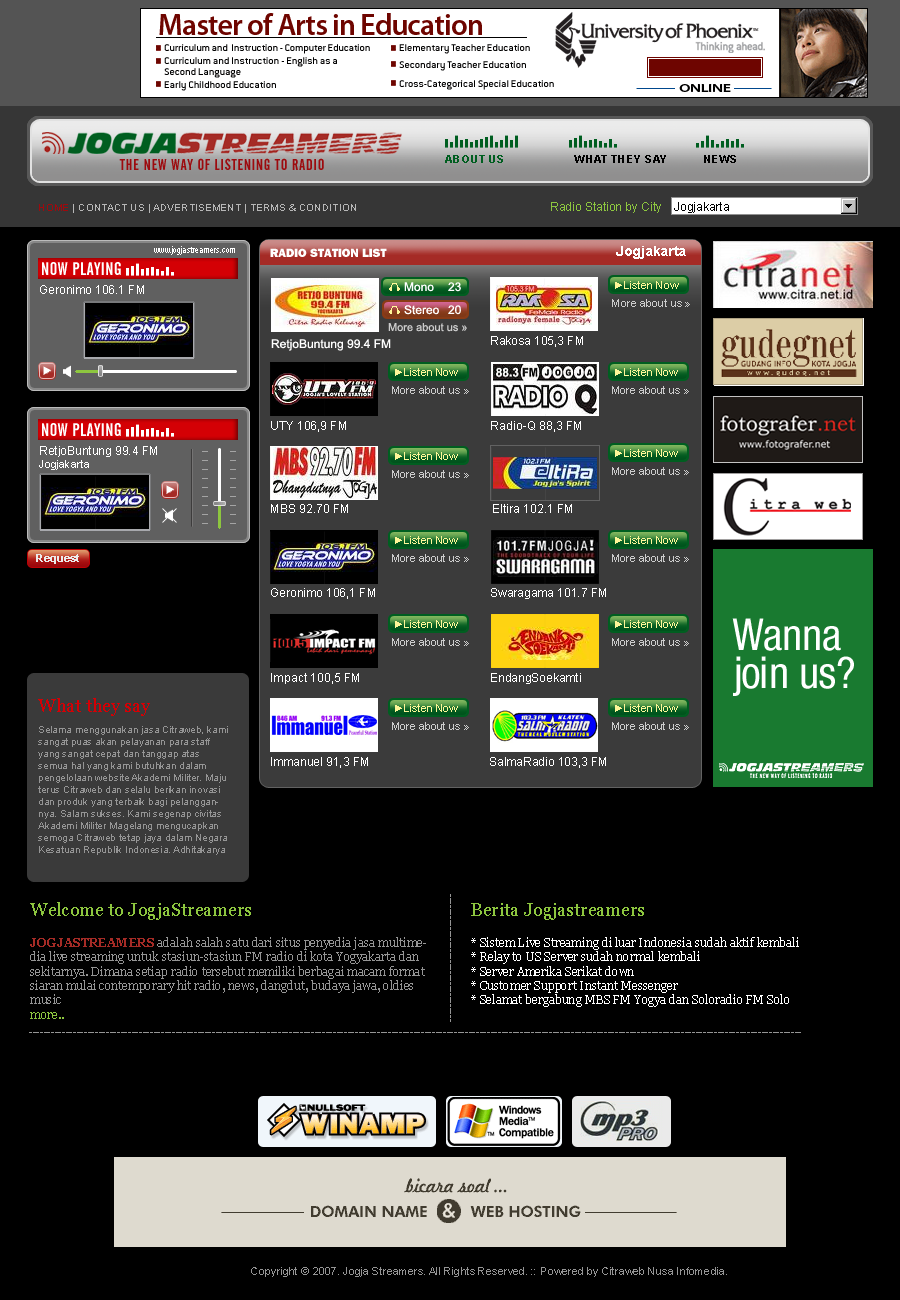
<style>
.page{position:relative;width:900px;height:1300px;background:#000000}
.page>*{position:absolute;margin:0}
.t1{font:11px "Arial-BoldMT";letter-spacing:0.025em;color:#000000;text-transform:uppercase}
.t2{font:11px "Arial-BoldMT";letter-spacing:0.025em;color:#005e20;text-transform:uppercase}
.t3{font:10px "ArialMT";letter-spacing:0.025em;color:#b7b7b7;text-transform:uppercase}
.t4{font:10px "ArialMT";letter-spacing:0.025em;color:#9d0a0e;text-transform:uppercase}
.t5{font:12px "ArialMT";color:#8dc63f}
.t6{font:12px "ArialMT";color:#000000}
.t7{font:9px "ArialNarrow";color:#ffffff}
.t8{font:14px "Arial-BoldMT";color:#ffffff}
.t9{font:12px "FrancisGothicNormal";color:#ffffff}
.t10{font:18px "AlternateGothicNo2BT-Regular";letter-spacing:0.025em;color:#ffffff}
.t11{font:11px "ArialMT";color:#fff799}
.t12{font:12px "ArialMT";color:#ffffff}
.t13{font:11px "ArialMT";color:#cccccc}
.t14{font:11px "ArialMT";color:#ffffff}
.t15{font:11px "Arial-BoldMT";color:#ebebeb}
.t16{font:18px "Georgia";color:#d40005}
.t17{font:10px "ArialMT";color:#959595}
.t18{font:11px "Arial-BoldMT";color:#ffffff}
.t19{font:10px "ArialMT";color:#f7941d}
.t20{font:11px "Arial-BoldMT";color:#959595}
.t21{font:12px "Georgia";color:#959595}
.t22{font:18px "Georgia";color:#8dc63f}
.t23{font:12px "Georgia-Bold";color:#a52b26}
.t24{font:12px "Georgia";color:#8dc63f}
.t25{font:12px "Georgia";color:#ffffff}
.t26{font:11px "ArialMT";color:#959595}
</style>
<div class="page">
<p class="t1" style="left:445px;top:155px;width:291px;height:8px"><span class="t2">ABOUT US</span>                     WHAT THEY SAY           NEWS</p>
<p class="t3" style="left:39px;top:204px;width:317px;height:9px"><span class="t4">Home</span> | Contact Us | Advertisement | terms &amp; condition</p>
<p class="t5" style="left:551px;top:202px;width:110px;height:11px">Radio Station by City</p>
<p class="t6" style="left:674px;top:202px;width:55px;height:11px">Jogjakarta</p>
<p class="t7" style="left:154px;top:246px;width:81px;height:9px">www.jogjastreamers.com</p>
<p class="t8" style="left:616px;top:246px;width:70px;height:13px">Jogjakarta</p>
<p class="t9" style="left:270px;top:248px;width:117px;height:9px">RADIO STATION LIST</p>
<p class="t10" style="left:42px;top:262px;width:79px;height:13px">NOW PLAYING</p>
<p class="t11" style="left:615px;top:281px;width:64px;height:8px">►Listen Now</p>
<p class="t12" style="left:40px;top:285px;width:104px;height:9px">Geronimo 106.1 FM</p>
<p class="t12" style="left:404px;top:282px;width:30px;height:10px">Mono</p>
<p class="t12" style="left:448px;top:282px;width:13px;height:10px">23</p>
<p class="t12" style="left:404px;top:305px;width:35px;height:10px">Stereo</p>
<p class="t12" style="left:448px;top:305px;width:13px;height:10px">20</p>
<p class="t13" style="left:612px;top:299px;width:78px;height:8px">More about us »</p>
<p class="t13" style="left:388px;top:323px;width:79px;height:9px">More about us »</p>
<p class="t12" style="left:271px;top:339px;width:120px;height:12px">RetjoBuntung 99.4 FM</p>
<p class="t12" style="left:491px;top:336px;width:92px;height:11px">Rakosa 105,3 FM</p>
<p class="t12" style="left:271px;top:421px;width:75px;height:11px">UTY 106,9 FM</p>
<p class="t12" style="left:491px;top:421px;width:90px;height:11px">Radio-Q 88,3 FM</p>
<p class="t12" style="left:40px;top:446px;width:117px;height:11px">RetjoBuntung 99.4 FM</p>
<p class="t14" style="left:39px;top:460px;width:50px;height:10px">Jogjakarta</p>
<p class="t12" style="left:271px;top:504px;width:77px;height:9px">MBS 92.70 FM</p>
<p class="t12" style="left:493px;top:504px;width:79px;height:9px">Eltira 102.1 FM</p>
<p class="t15" style="left:36px;top:554px;width:43px;height:10px">Request</p>
<p class="t12" style="left:271px;top:588px;width:104px;height:11px">Geronimo 106,1 FM</p>
<p class="t12" style="left:491px;top:588px;width:115px;height:11px">Swaragama 101.7 FM</p>
<p class="t12" style="left:271px;top:673px;width:88px;height:11px">Impact 100,5 FM</p>
<p class="t12" style="left:491px;top:673px;width:90px;height:11px">EndangSoekamti</p>
<p class="t16" style="left:38px;top:698px;width:112px;height:18px">What they say</p>
<p class="t17" style="left:38px;top:726px;width:190px;height:129px">Selama menggunakan jasa Citraweb, kami sangat puas akan pelayanan para staff yang sangat cepat dan tanggap atas semua hal yang kami butuhkan dalam pengelolaan website Akademi Militer. Maju terus Citraweb dan selalu berikan inovasi dan produk yang terbaik bagi pelanggannya. Salam sukses. Kami segenap civitas Akademi Militer Magelang mengucapkan semoga Citraweb tetap jaya dalam Negara Kesatuan Republik Indonesia. Adhitakarya Mahatvavirya Nagarabhakti!!<br><br><span class="t18">Ir. Widyo Pramono (Akademi Militer Magelang, )<br><br></span><span class="t19">indeks</span></p>
<p class="t12" style="left:271px;top:757px;width:97px;height:11px">Immanuel 91,3 FM</p>
<p class="t12" style="left:490px;top:757px;width:116px;height:11px">SalmaRadio 103,3 FM</p>
<p class="t20" style="left:450px;top:894px;width:1px;height:128px;rotate:90deg">-----------------------------------</p>
<p class="t21" style="left:30px;top:902px;width:396px;height:117px"><span class="t22">Welcome to JogjaStreamers<br><br></span><span class="t23">JOGJASTREAMERS </span>adalah salah satu dari situs penyedia jasa multimedia live streaming untuk stasiun-stasiun FM radio di kota Yogyakarta dan sekitarnya. Dimana setiap radio tersebut memiliki berbagai macam format siaran mulai contemporary hit radio, news, dangdut, budaya jawa, oldies music<br><span class="t24">more..</span></p>
<p class="t25" style="left:471px;top:903px;width:328px;height:104px"><span class="t22">Berita Jogjastreamers<br><br></span>* Sistem Live Streaming di luar Indonesia sudah aktif kembali<br>* Relay to US Server sudah normal kembali<br>* Server Amerika Serikat down<br>* Customer Support Instant Messenger<br>* Selamat bergabung MBS FM Yogya dan Soloradio FM Solo</p>
<p class="t20" style="left:29px;top:1032px;width:772px;height:1px">-------------------------------------------------------------------------------------------------------------------------------------------------------------------------------------------------------------------</p>
<p class="t26" style="left:251px;top:1267px;width:476px;height:10px">Copyright © 2007. Jogja Streamers. All Rights Reserved. :: Powered by Citraweb Nusa Infomedia.</p>
</div>
